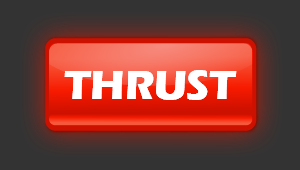
<style>
.page{position:relative;width:300px;height:170px;background:#333333}
.page>*{position:absolute;margin:0}
.t1{font:41.7px "ErasITC-Bold";color:#ffffff}
</style>
<div class="page">
<p class="t1" style="left:64px;top:70px;width:173px;height:30px">THRUST</p>
<p class="t1" style="left:64px;top:70px;width:173px;height:30px">THRUST</p>
</div>
